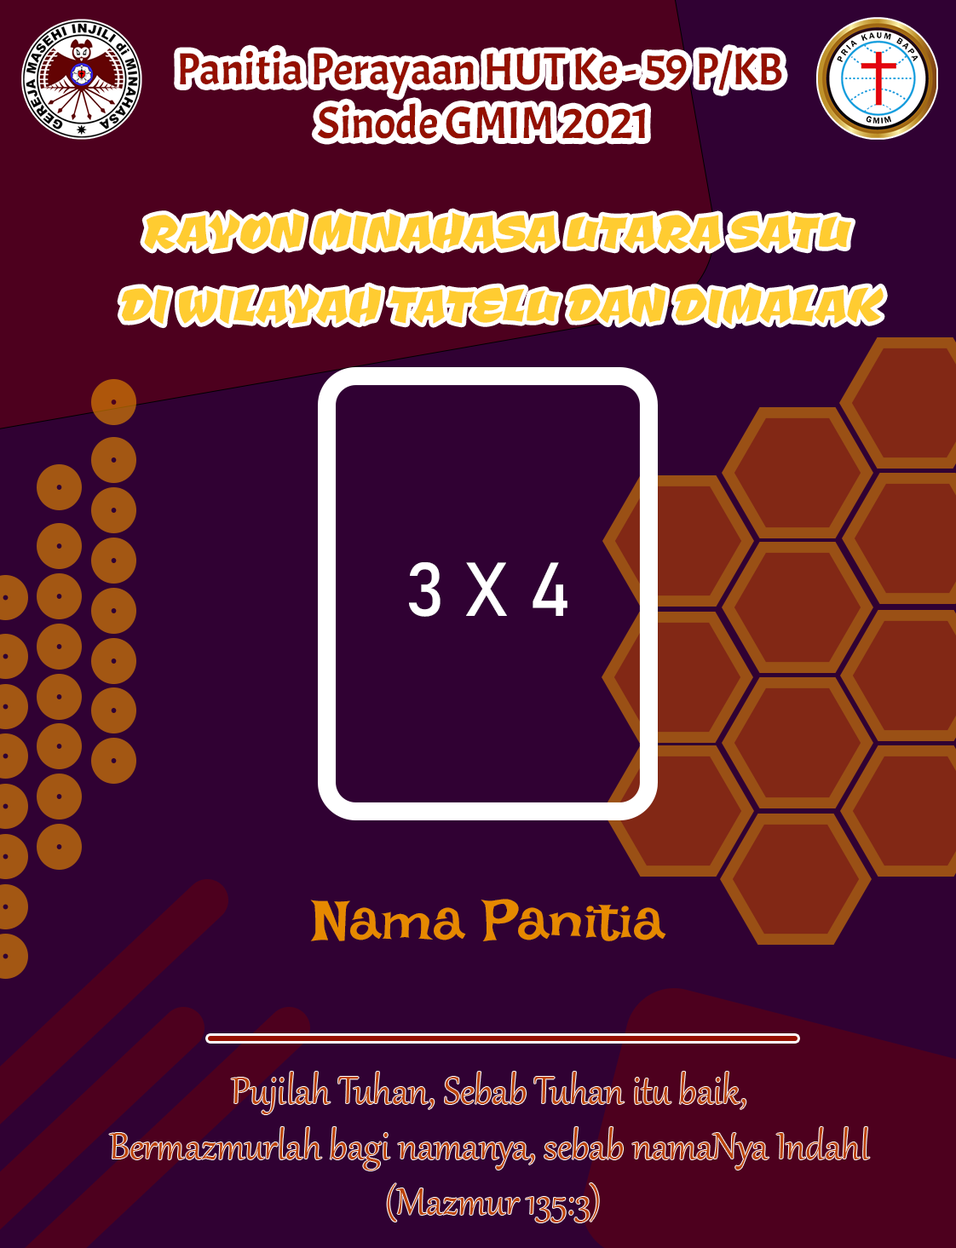
<style>
.page{position:relative;width:956px;height:1248px;background:#300133}
.page>*{position:absolute;margin:0}
.t1{font:44.9px "Acme-Regular";color:#941000}
.t2{font:61.9px "CevicheOne-Regular";color:#ffcc31}
.t3{font:75px "Bahnschrift";color:#ffffff}
.t4{font:59.6px "IrishGrover-Regular";color:#e68900}
.t5{font:45.8px "Gabriola";color:#bd4400}
</style>
<div class="page">
<p class="t1" style="left:180px;top:50px;width:602px;height:89px;text-align:center">Panitia Perayaan HUT Ke - 59 P/KB <br>Sinode GMIM 2021</p>
<p class="t2" style="left:121px;top:212px;width:762px;height:113px;text-align:center">RAYON MINAHASA UTARA SATU<br> DI WILAYAH TATELU DAN DIMALAK</p>
<p class="t3" style="left:409px;top:562px;width:158px;height:55px">3 X 4</p>
<p class="t4" style="left:310px;top:899px;width:356px;height:42px">Nama Panitia</p>
<p class="t5" style="left:109px;top:1071px;width:761px;height:151px;text-align:center">Pujilah Tuhan, Sebab Tuhan itu baik, <br>Bermazmurlah bagi namanya, sebab namaNya Indahl <br>(Mazmur 135:3)</p>
</div>
